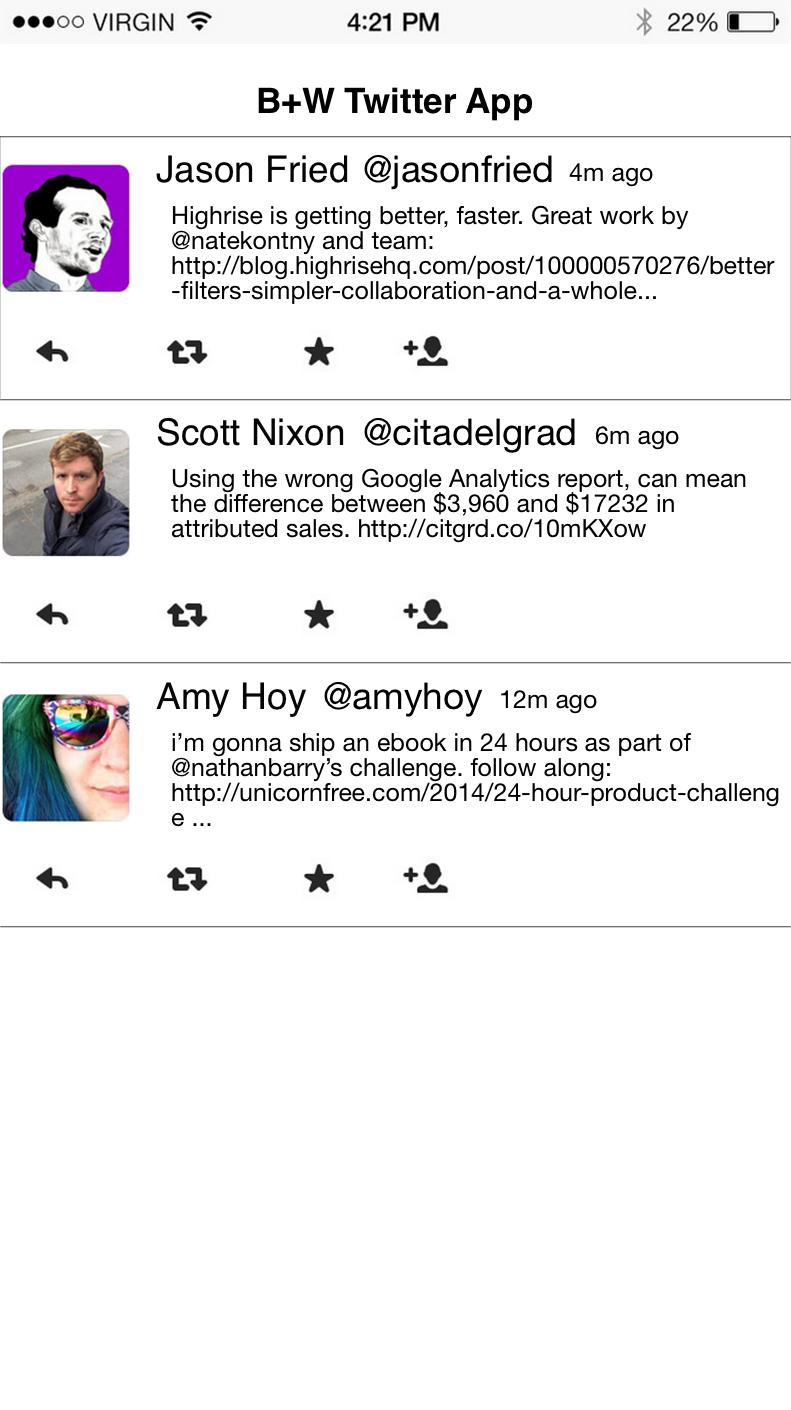
<style>
.page{position:relative;width:791px;height:1410px;background:#ffffff}
.page>*{position:absolute;margin:0}
.t1{font:35px "Helvetica-Bold";color:#000000}
.t2{font:37px "Helvetica";color:#050505}
.t3{font:37px "HelveticaNeue";color:#000000}
.t4{font:25px "HelveticaNeue";color:#000000}
.t5{font:25px/25px "HelveticaNeue";color:#000000}
</style>
<div class="page">
<p class="t1" style="left:258px;top:87px;width:275px;height:34px">B+W Twitter App</p>
<p class="t2" style="left:156px;top:155px;width:192px;height:28px">Jason Fried</p>
<p class="t3" style="left:364px;top:155px;width:188px;height:35px">@jasonfried</p>
<p class="t4" style="left:569px;top:163px;width:84px;height:24px">4m ago</p>
<p class="t5" style="left:172px;top:205px;width:603px;height:99px">Highrise is getting better, faster. Great work by<br>@natekontny and team:<br>http://blog.highrisehq.com/post/100000570276/better<br>-filters-simpler-collaboration-and-a-whole...</p>
<p class="t2" style="left:157px;top:417px;width:187px;height:29px">Scott Nixon</p>
<p class="t3" style="left:364px;top:418px;width:211px;height:35px">@citadelgrad</p>
<p class="t4" style="left:596px;top:426px;width:83px;height:24px">6m ago</p>
<p class="t5" style="left:171px;top:468px;width:575px;height:75px">Using the wrong Google Analytics report, can mean<br>the difference between $3,960 and $17232 in<br>attributed sales. http://citgrd.co/10mKXow</p>
<p class="t2" style="left:156px;top:682px;width:150px;height:35px">Amy Hoy</p>
<p class="t3" style="left:324px;top:682px;width:158px;height:35px">@amyhoy</p>
<p class="t4" style="left:501px;top:690px;width:96px;height:24px">12m ago</p>
<p class="t5" style="left:171px;top:733px;width:608px;height:94px">i’m gonna ship an ebook in 24 hours as part of<br>@nathanbarry’s challenge. follow along:<br>http://unicornfree.com/2014/24-hour-product-challeng<br>e ...</p>
</div>
